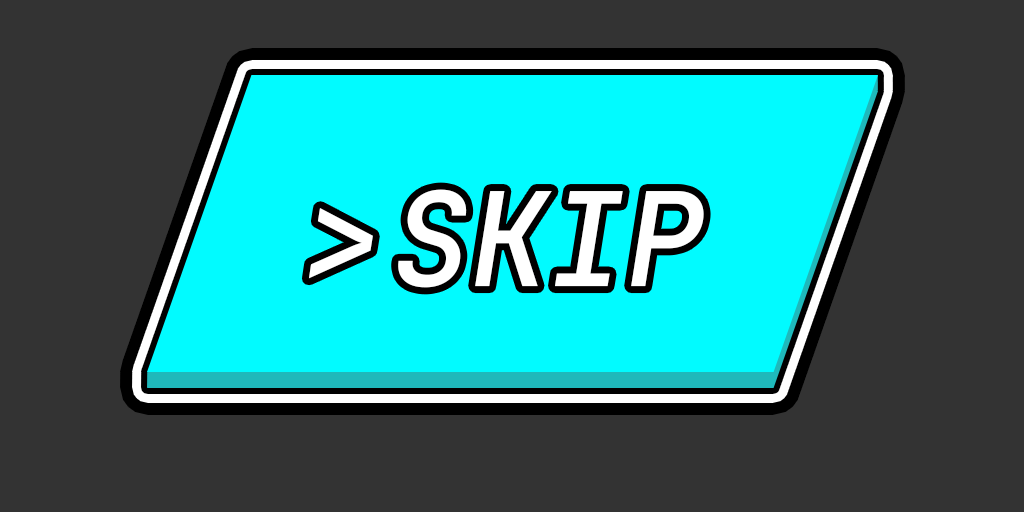
<style>
.page{position:relative;width:1024px;height:512px;background:#333333}
.page>*{position:absolute;margin:0}
.t1{font:130px "JetBrainsMonoItalic-MediumItalic";color:#ffffff}
</style>
<div class="page">
<p class="t1" style="left:308px;top:189px;width:396px;height:99px">SKIP</p>
</div>
